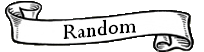
<style>
.page{position:relative;width:204px;height:52px;background:#ffffff}
.page>*{position:absolute;margin:0}
.t1{font:24px "Perpetua";color:#000000}
</style>
<div class="page">
<p class="t1" style="left:63px;top:19px;width:73px;height:20px">Random</p>
</div>
